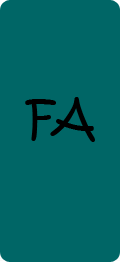
<style>
.page{position:relative;width:120px;height:262px;background:#006666}
.page>*{position:absolute;margin:0}
.t1{font:48px "KristenITC-Regular";color:#000000}
</style>
<div class="page">
<p class="t1" style="left:25px;top:93px;width:71px;height:59px">FA</p>
</div>
